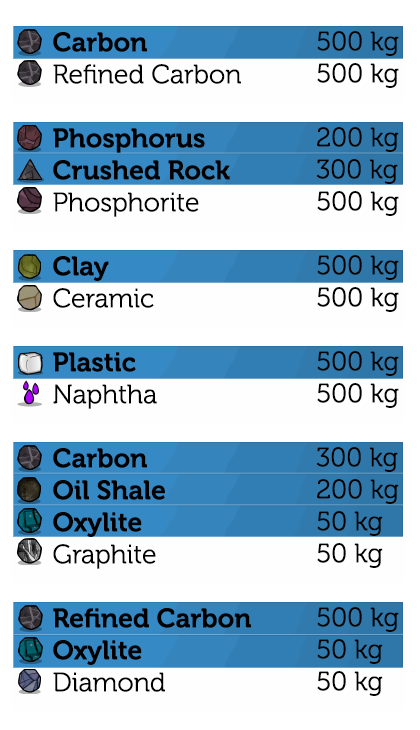
<style>
.page{position:relative;width:420px;height:730px;background:#fefefe}
.page>*{position:absolute;margin:0}
.t1{font:26.7px "Museo-700";color:#000000}
.t2{font:26.7px "Museo-300";color:#000000}
</style>
<div class="page">
<p class="t1" style="left:53px;top:32px;width:198px;height:660px">Carbon<br><span class="t2">Refined Carbon<br><br></span>Phosphorus<br>Crushed Rock<br><span class="t2">Phosphorite<br><br></span>Clay<br><span class="t2">Ceramic<br><br></span>Plastic<br><span class="t2">Naphtha<br><br></span>Carbon<br>Oil Shale<br>Oxylite<br><span class="t2">Graphite<br><br></span>Refined Carbon<br>Oxylite<br><span class="t2">Diamond</span></p>
<p class="t2" style="left:316px;top:31px;width:83px;height:665px">500 kg<br>500 kg<br><br>200 kg<br>300 kg<br>500 kg<br><br>500 kg<br>500 kg<br><br>500 kg<br>500 kg<br><br>300 kg<br>200 kg<br>50 kg<br>50 kg<br><br>500 kg<br>50 kg<br>50 kg</p>
</div>
